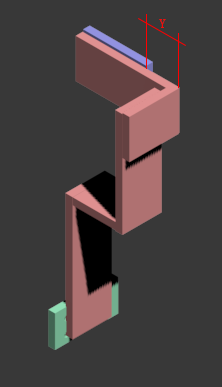
<style>
.page{position:relative;width:222px;height:387px;background:#383838}
.page>*{position:absolute;margin:0}
.t1{font:13.3px "NSimSun";color:#f90906}
</style>
<div class="page">
<p class="t1" style="left:159px;top:19px;width:7px;height:9px">Y</p>
</div>
